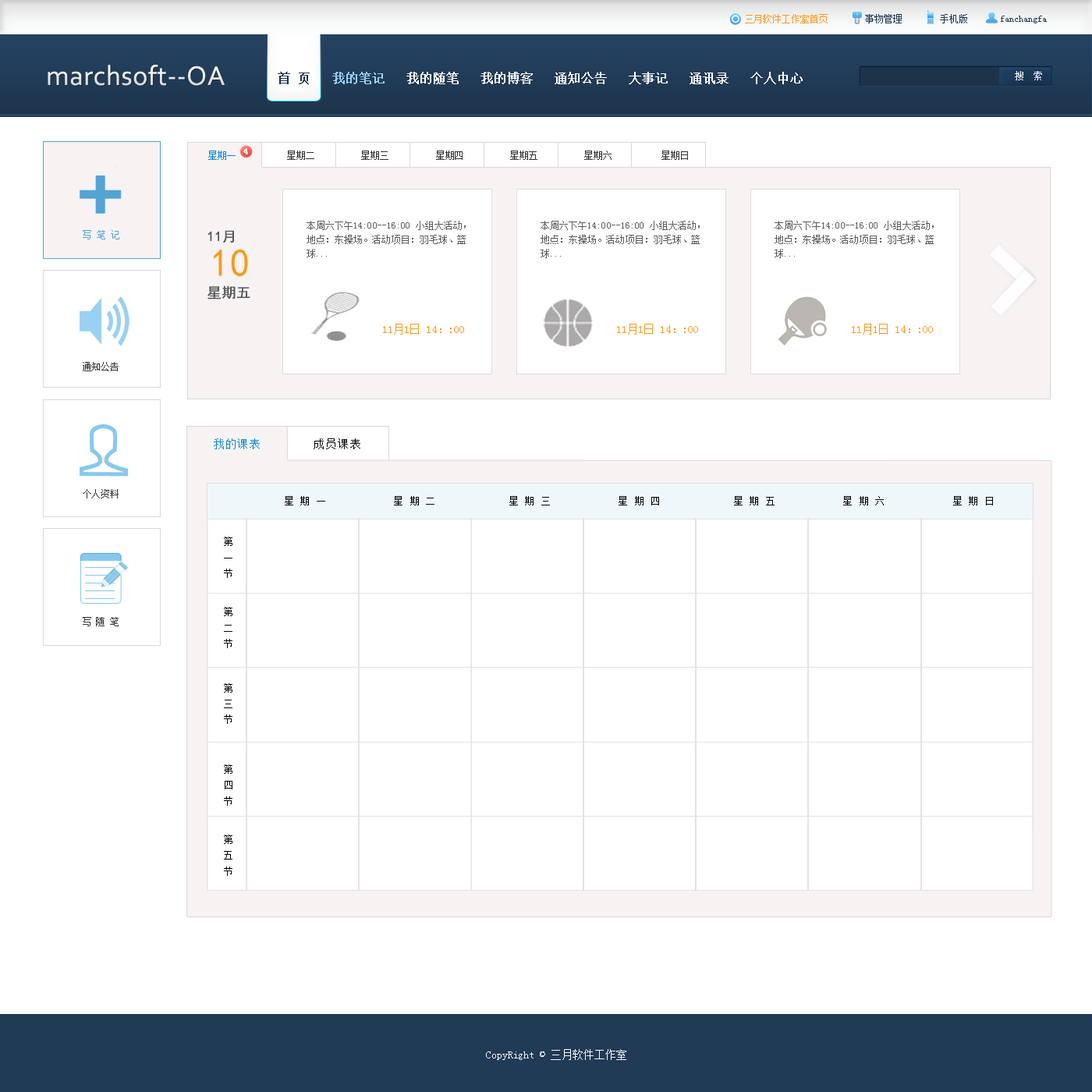
<style>
.page{position:relative;width:1092px;height:1092px;background:#ffffff}
.page>*{position:absolute;margin:0}
.t1{font:9.4px "SimSun";letter-spacing:-0.005em;color:#203b55}
.t2{font:9.4px "SimSun";letter-spacing:-0.005em;color:#fc9918}
.t3{font:28.1px "Corbel";letter-spacing:0.01em;color:#e6e6e6}
.t4{font:28.1px "Corbel";letter-spacing:0.01em}
.t5{font:12.5px "SimSun";color:#ffffff;font-weight:bold}
.t6{font:12.5px "SimSun";color:#1d354d;font-weight:bold}
.t7{font:12.5px "SimSun";color:#99d1f2;font-weight:bold}
.t8{font:9.4px "SimSun";letter-spacing:0.01em;color:#ffffff}
.t9{font:9.4px "SimSun";color:#fefefe;font-weight:bold}
.t10{font:9.4px "SimSun";letter-spacing:-0.005em;color:#323131}
.t11{font:9.4px "SimSun";letter-spacing:-0.005em;color:#038adb}
.t12{font:9.4px/14px "SimSun";letter-spacing:0.01em;color:#5b5b5b}
.t13{font:9.4px "SimSun";letter-spacing:-0.005em;color:#52a4d4}
.t14{font:14px/14px "SimHei";letter-spacing:0.01em;color:#56585a;font-weight:bold}
.t15{font:18.7px/14px "SimHei";letter-spacing:0.01em;color:#7dbfe7}
.t16{font:39px/14px "SimHei";letter-spacing:0.01em;color:#fc9918}
.t17{font:10.9px "SimSun";letter-spacing:0.01em;color:#fc9918}
.t18{font:10.9px "SimSun";letter-spacing:0.1em;color:#038adb}
.t19{font:10.9px "SimSun";letter-spacing:0.1em;color:#030303}
.t20{font:9.4px "SimSun";letter-spacing:0.1em;color:#030303}
.t21{font:9.4px/14px "SimSun";letter-spacing:0.1em;color:#030303}
.t22{font:10.9px "SimSun";letter-spacing:-0.005em;color:#f9f8f8}
</style>
<div class="page">
<p class="t1" style="left:745px;top:14px;width:302px;height:9px"><span class="t2">三月软件工作室首页       </span> 事物管理        手机版       fanchangfa</p>
<p class="t3" style="left:48px;top:65px;width:177px;height:21px">marchsoft--OA</p>
<p class="t4" style="left:48px;top:66px;width:177px;height:21px">marchsoft--OA</p>
<p class="t5" style="left:278px;top:72px;width:525px;height:12px"><span class="t6">首 页   </span><span class="t7">我的笔记</span>   我的随笔   我的博客   通知公告   大事记   通讯录   个人中心</p>
<p class="t8" style="left:1015px;top:71px;width:27px;height:9px">搜  索</p>
<p class="t9" style="left:243px;top:148px;width:5px;height:6px">4</p>
<p class="t10" style="left:208px;top:151px;width:480px;height:9px"><span class="t11">星期一 </span>          星期二          星期三          星期四          星期五          星期六           星期日</p>
<p class="t12" style="left:307px;top:221px;width:159px;height:37px">本周六下午14:00--16:00 小组大活动，地点：东操场。活动项目：羽毛球、篮球...</p>
<p class="t12" style="left:541px;top:221px;width:159px;height:37px">本周六下午14:00--16:00 小组大活动，地点：东操场。活动项目：羽毛球、篮球...</p>
<p class="t12" style="left:775px;top:221px;width:159px;height:37px">本周六下午14:00--16:00 小组大活动，地点：东操场。活动项目：羽毛球、篮球...</p>
<p class="t13" style="left:83px;top:230px;width:36px;height:9px">写 笔 记</p>
<p class="t14" style="left:207px;top:230px;width:43px;height:70px"><span class="t15"><br></span>11月<br><span class="t16">10<br>  <br><br></span>星期五</p>
<p class="t17" style="left:383px;top:324px;width:81px;height:11px">11月1日 14：:00</p>
<p class="t17" style="left:617px;top:324px;width:81px;height:11px">11月1日 14：:00</p>
<p class="t17" style="left:852px;top:324px;width:81px;height:11px">11月1日 14：:00</p>
<p class="t10" style="left:83px;top:362px;width:36px;height:9px">通知公告</p>
<p class="t18" style="left:214px;top:438px;width:146px;height:11px">我的课表<span class="t19">        成员课表</span></p>
<p class="t10" style="left:83px;top:489px;width:36px;height:9px">个人资料</p>
<p class="t20" style="left:285px;top:496px;width:708px;height:9px">星 期 一            星 期 二             星 期 三            星 期 四             星 期 五            星 期 六            星 期 日</p>
<p class="t21" style="left:224px;top:537px;width:8px;height:339px">第 一 节     第 二 节      第 三 节       第 四 节     第 五 节</p>
<p class="t10" style="left:83px;top:617px;width:36px;height:9px">写 随 笔</p>
<p class="t22" style="left:486px;top:1049px;width:140px;height:11px">CopyRight © 三月软件工作室</p>
</div>
